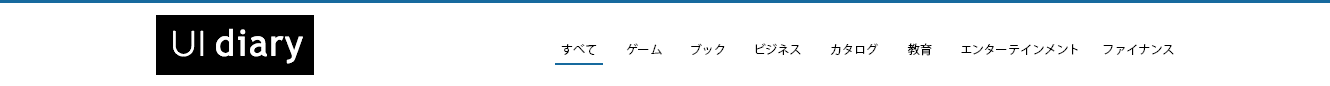
<style>
.page{position:relative;width:1330px;height:86px;background:#ffffff}
.page>*{position:absolute;margin:0}
.t1{font:36px "GillSans-Light";letter-spacing:0.1em;color:#ffffff}
.t2{font:36px "TrebuchetMS";letter-spacing:0.08em;color:#ffffff}
.t3{font:12px "KozGoPr6N-Regular";color:#000000}
</style>
<div class="page">
<p class="t1" style="left:173px;top:30px;width:31px;height:27px">UI</p>
<p class="t2" style="left:216px;top:28px;width:87px;height:36px">diary</p>
<p class="t3" style="left:561px;top:44px;width:36px;height:11px">すべて</p>
<p class="t3" style="left:626px;top:43px;width:36px;height:12px">ゲーム</p>
<p class="t3" style="left:691px;top:43px;width:34px;height:12px">ブック</p>
<p class="t3" style="left:755px;top:43px;width:46px;height:12px">ビジネス</p>
<p class="t3" style="left:830px;top:43px;width:49px;height:12px">カタログ</p>
<p class="t3" style="left:907px;top:43px;width:25px;height:13px">教育</p>
<p class="t3" style="left:961px;top:44px;width:117px;height:11px">エンターテインメント</p>
<p class="t3" style="left:1103px;top:44px;width:71px;height:11px">ファイナンス</p>
</div>
